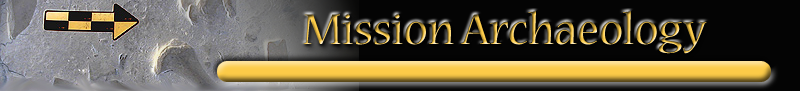
<style>
.page{position:relative;width:800px;height:91px;background:#040404}
.page>*{position:absolute;margin:0}
.t1{font:48px "NuevaStd-Regular"}
</style>
<div class="page">
<p class="t1" style="left:303px;top:11px;width:404px;height:43px">Mission Archaeology</p>
</div>
